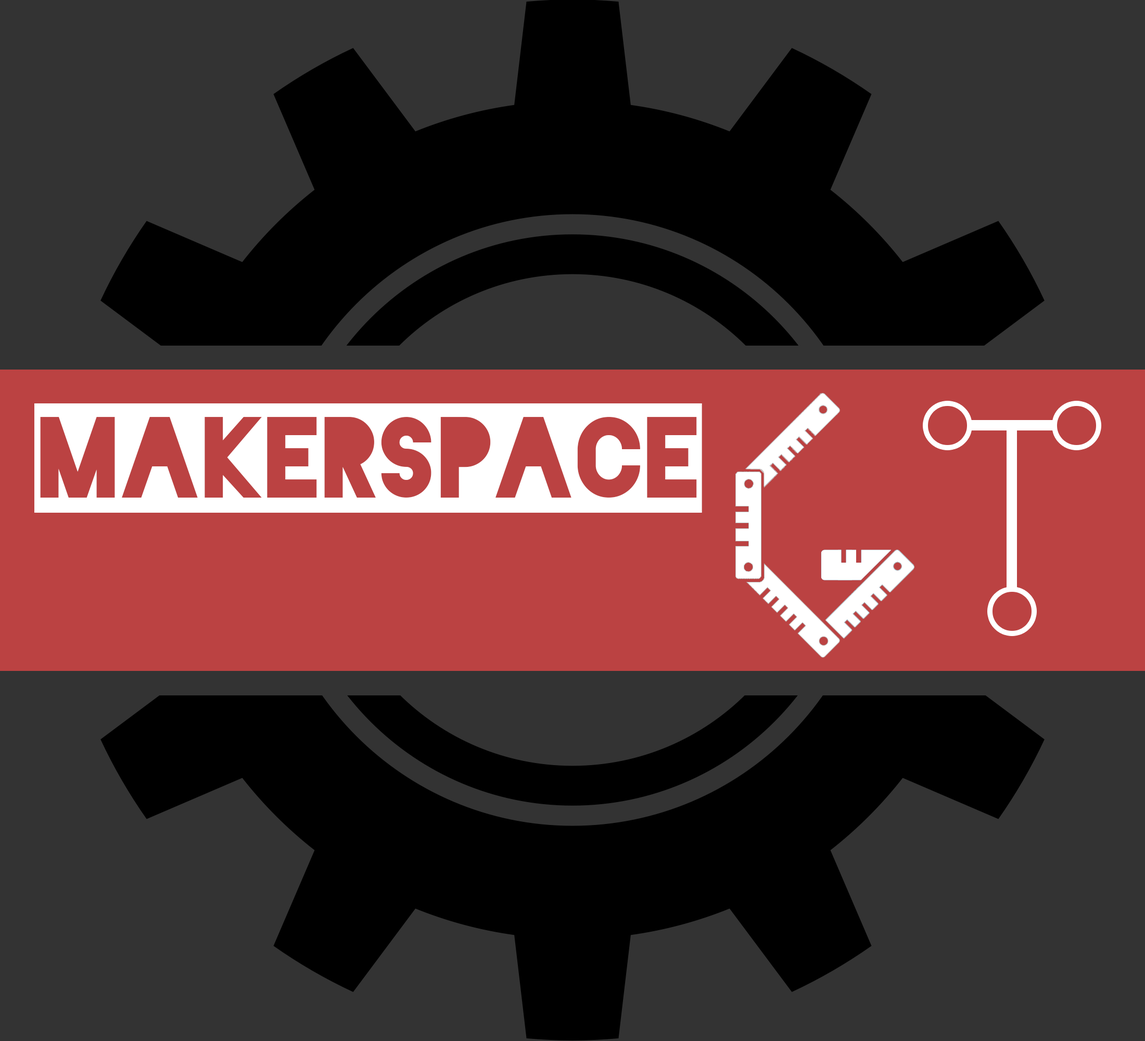
<style>
.page{position:relative;width:1145px;height:1041px;background:#333333}
.page>*{position:absolute;margin:0}
.t1{font:130.1px "Blackout-2AM";color:#ffffff}
</style>
<div class="page">
<p class="t1" style="left:34px;top:403px;width:668px;height:110px">MAKERSPACE</p>
</div>
